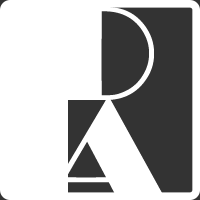
<style>
.page{position:relative;width:200px;height:200px;background:#ffffff}
.page>*{position:absolute;margin:0}
.t1{font:140px/95px "Broadway";letter-spacing:0.05em;color:#ffffff}
</style>
<div class="page">
<p class="t1" style="left:51px;top:6px;width:112px;height:191px">D<br>A</p>
</div>
